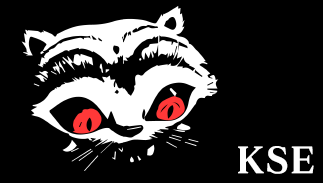
<style>
.page{position:relative;width:323px;height:183px;background:#000000}
.page>*{position:absolute;margin:0}
.t1{font:37.3px "SF_HambakSnow";color:#fefefe}
</style>
<div class="page">
<p class="t1" style="left:238px;top:146px;width:76px;height:28px">KSE</p>
</div>
